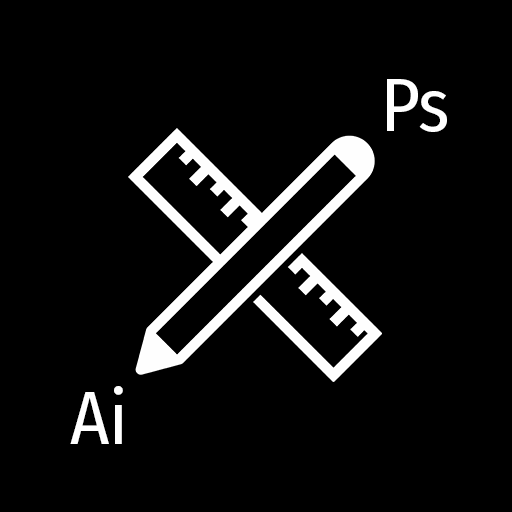
<style>
.page{position:relative;width:512px;height:512px;background:#000000}
.page>*{position:absolute;margin:0}
.t1{font:75px "FiraSansCondensed-Regular";color:#ffffff}
</style>
<div class="page">
<p class="t1" style="left:387px;top:79px;width:60px;height:53px">Ps</p>
<p class="t1" style="left:70px;top:386px;width:53px;height:58px">Ai</p>
</div>
